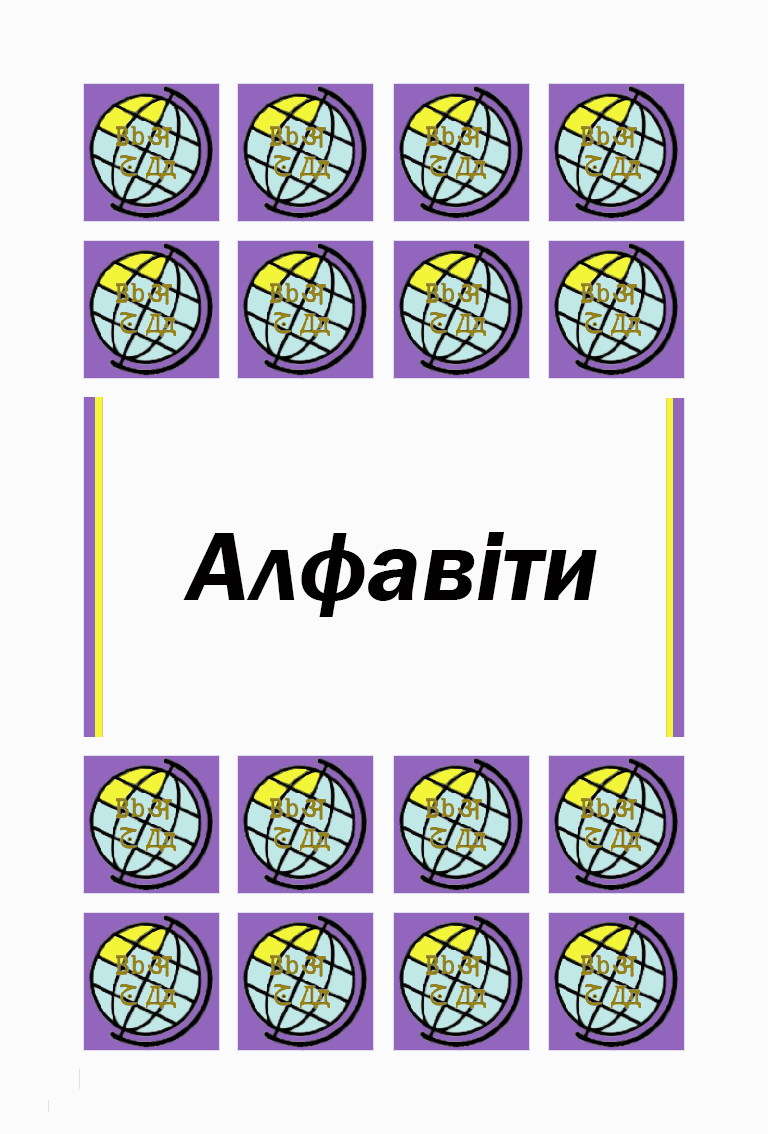
<style>
.page{position:relative;width:768px;height:1134px;background:#fbfbfb}
.page>*{position:absolute;margin:0}
.t1{font:100px "FranklinGothic-DemiItalic";color:#020000}
</style>
<div class="page">
<p class="t1" style="left:183px;top:532px;width:414px;height:85px">Алфавіти</p>
</div>
